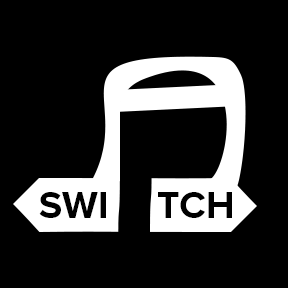
<style>
.page{position:relative;width:288px;height:288px;background:#000000}
.page>*{position:absolute;margin:0}
.t1{font:39px "ProximaNova-Bold";color:#000000}
</style>
<div class="page">
<p class="t1" style="left:39px;top:192px;width:67px;height:26px">SWI</p>
<p class="t1" style="left:158px;top:192px;width:74px;height:26px">TCH</p>
</div>
